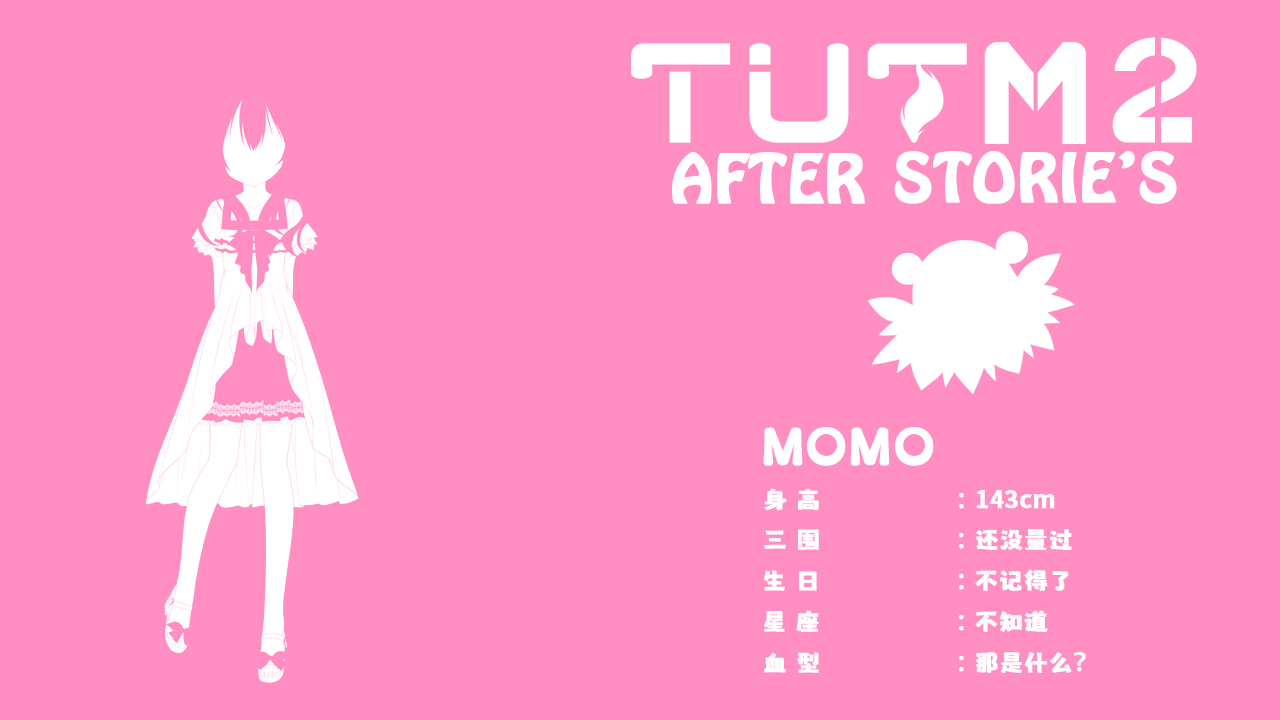
<style>
.page{position:relative;width:1280px;height:720px;background:#ff8fc3}
.page>*{position:absolute;margin:0}
.t1{font:24px "MaokenAssortedSans";color:#ffffff;font-weight:bold}
.t2{font:24px "AdobeHeitiStd-Regular";color:#ffffff;font-weight:bold}
.t3{font:24px "SourceHanSansSC-Bold";color:#ffffff;font-weight:bold}
</style>
<div class="page">
<p class="t1" style="left:764px;top:488px;width:200px;height:23px">身 高               <span class="t2">：</span></p>
<p class="t3" style="left:976px;top:490px;width:79px;height:19px">143cm</p>
<p class="t1" style="left:764px;top:529px;width:200px;height:21px">三 围               <span class="t2">：</span></p>
<p class="t1" style="left:976px;top:529px;width:96px;height:22px">还没量过</p>
<p class="t1" style="left:975px;top:569px;width:94px;height:22px">不记得了</p>
<p class="t1" style="left:763px;top:570px;width:201px;height:21px">生 日               <span class="t2">：</span></p>
<p class="t1" style="left:764px;top:610px;width:200px;height:22px">星 座               <span class="t2">：</span></p>
<p class="t1" style="left:975px;top:610px;width:73px;height:22px">不知道</p>
<p class="t1" style="left:764px;top:652px;width:200px;height:21px">血 型               <span class="t2">：</span></p>
<p class="t1" style="left:976px;top:652px;width:110px;height:21px">那是什么<span class="t2">？</span>？</p>
</div>
